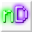
<style>
.page{position:relative;width:32px;height:32px}
.page>*{position:absolute;margin:0}
.t1{font:16px "bobsgame"}
</style>
<div class="page">
<p class="t1" style="left:15px;top:6px;width:12px;height:16px">D</p>
<p class="t1" style="left:3px;top:10px;width:10px;height:12px">n</p>
</div>
